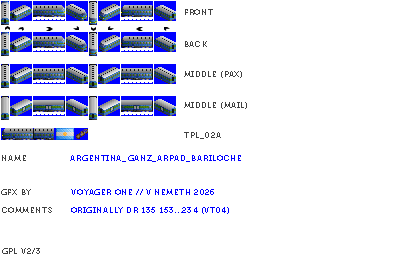
<style>
.page{position:relative;width:400px;height:270px;background:#ffffff}
.page>*{position:absolute;margin:0}
.t1{font:8px "Museo700-Regular";letter-spacing:0.075em;color:#404040;text-transform:uppercase}
.t2{font:8px "Museo700-Regular";letter-spacing:0.075em;color:#0000ff;text-transform:uppercase}
</style>
<div class="page">
<p class="t1" style="left:185px;top:9px;width:28px;height:6px">front</p>
<p class="t1" style="left:185px;top:41px;width:22px;height:6px">back</p>
<p class="t1" style="left:184px;top:71px;width:58px;height:7px">middle (pax)</p>
<p class="t1" style="left:184px;top:102px;width:63px;height:7px">middle (mail)</p>
<p class="t1" style="left:184px;top:132px;width:37px;height:7px">tpl_02a</p>
<p class="t1" style="left:2px;top:155px;width:24px;height:6px">name</p>
<p class="t2" style="left:70px;top:155px;width:171px;height:7px">Argentina_Ganz_Arpad_Bariloche</p>
<p class="t1" style="left:1px;top:189px;width:30px;height:6px">gfx by</p>
<p class="t2" style="left:71px;top:189px;width:143px;height:6px">voyager one // v nemeth 2026</p>
<p class="t1" style="left:2px;top:207px;width:50px;height:6px">comments</p>
<p class="t2" style="left:71px;top:207px;width:158px;height:7px">originally dr 135 153...234 (vt04)</p>
<p class="t1" style="left:2px;top:248px;width:38px;height:6px">gpl v2/3</p>
</div>
